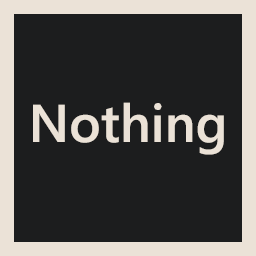
<style>
.page{position:relative;width:256px;height:256px;background:#1c1d1e}
.page>*{position:absolute;margin:0}
.t1{font:53px "YuGothicUI-Semibold";color:#ebe2d7}
</style>
<div class="page">
<p class="t1" style="left:33px;top:102px;width:191px;height:53px">Nothing</p>
</div>
